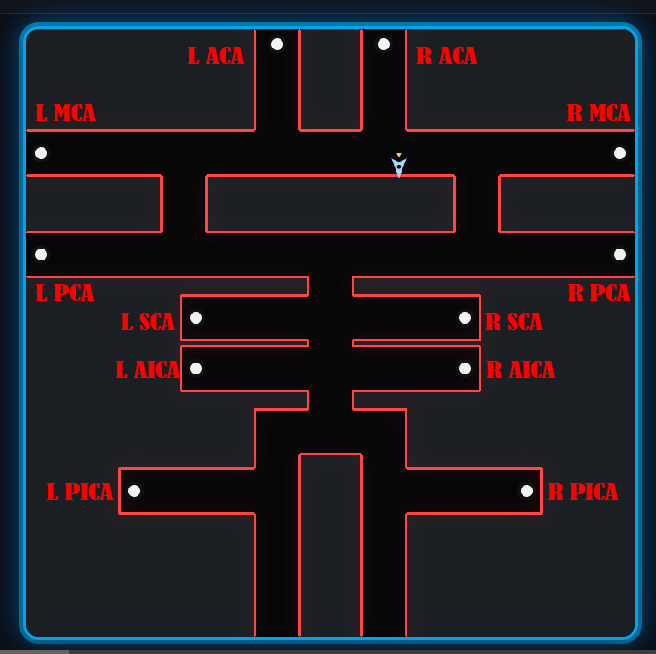
<style>
.page{position:relative;width:656px;height:654px;background:#1b1f24}
.page>*{position:absolute;margin:0}
.t1{font:21.1px "BernardMT-Condensed";letter-spacing:-0.025em;color:#ff0000;scale:1.42 1}
</style>
<div class="page">
<p class="t1" style="left:187px;top:47px;width:58px;height:17px">L ACA</p>
<p class="t1" style="left:416px;top:47px;width:62px;height:17px">R ACA</p>
<p class="t1" style="left:35px;top:104px;width:61px;height:17px">L MCA</p>
<p class="t1" style="left:567px;top:104px;width:64px;height:17px">R MCA</p>
<p class="t1" style="left:35px;top:284px;width:60px;height:17px">L PCA</p>
<p class="t1" style="left:568px;top:284px;width:63px;height:17px">R PCA</p>
<p class="t1" style="left:121px;top:313px;width:54px;height:17px">L SCA</p>
<p class="t1" style="left:485px;top:313px;width:58px;height:17px">R SCA</p>
<p class="t1" style="left:115px;top:361px;width:66px;height:17px">L AICA</p>
<p class="t1" style="left:486px;top:361px;width:70px;height:17px">R AICA</p>
<p class="t1" style="left:46px;top:483px;width:68px;height:17px">L PICA</p>
<p class="t1" style="left:548px;top:483px;width:71px;height:17px">R PICA</p>
</div>
